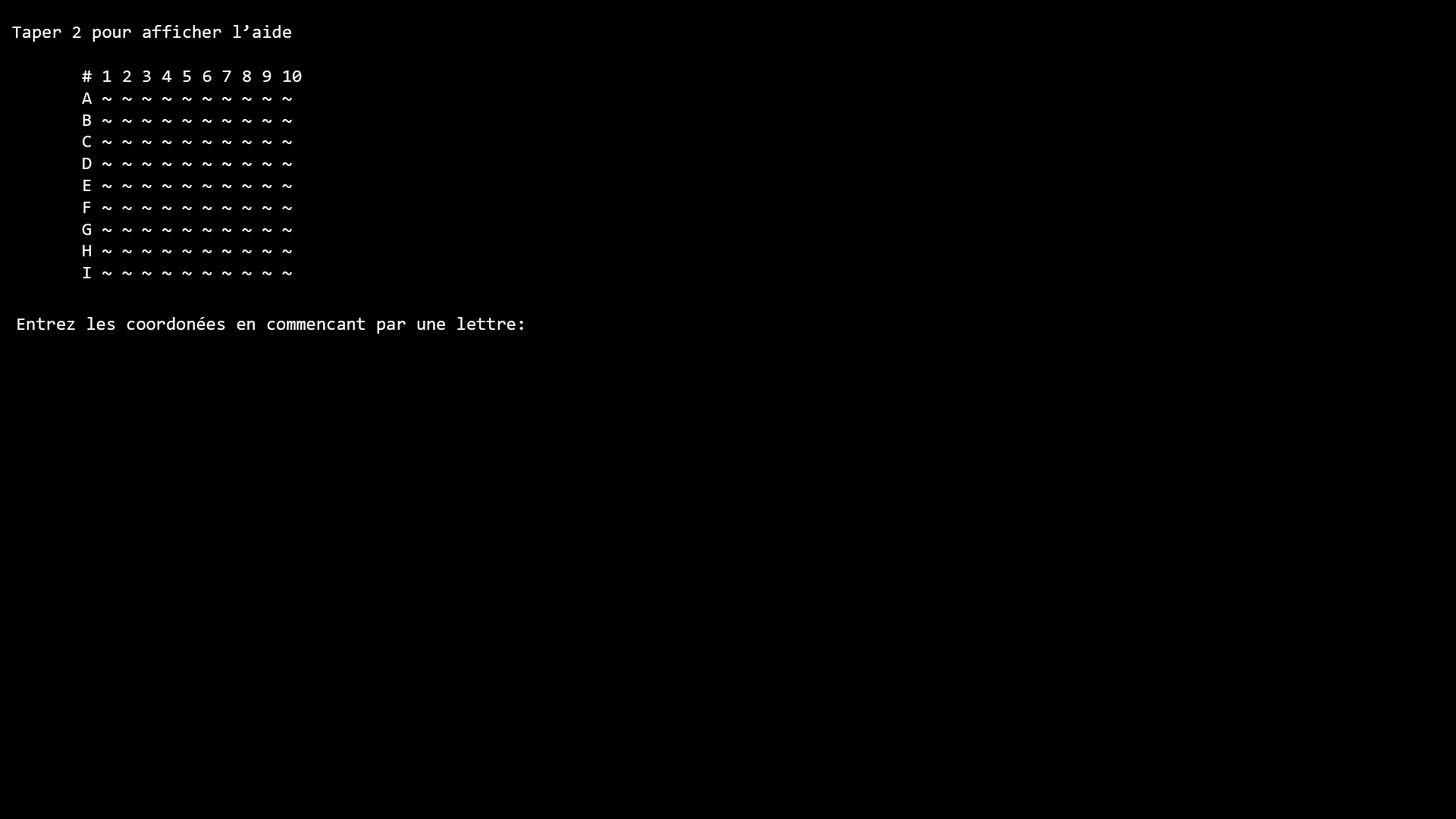
<style>
.page{position:relative;width:1456px;height:819px;background:#000000}
.page>*{position:absolute;margin:0}
.t1{font:18.2px "Consolas";color:#fcf7f7}
</style>
<div class="page">
<p class="t1" style="left:12px;top:25px;width:279px;height:17px">Taper 2 pour afficher l’aide</p>
<p class="t1" style="left:82px;top:71px;width:220px;height:207px"># 1 2 3 4 5 6 7 8 9 10<br>A ~ ~ ~ ~ ~ ~ ~ ~ ~ ~ <br>B ~ ~ ~ ~ ~ ~ ~ ~ ~ ~<br>C ~ ~ ~ ~ ~ ~ ~ ~ ~ ~<br>D ~ ~ ~ ~ ~ ~ ~ ~ ~ ~<br>E ~ ~ ~ ~ ~ ~ ~ ~ ~ ~<br>F ~ ~ ~ ~ ~ ~ ~ ~ ~ ~<br>G ~ ~ ~ ~ ~ ~ ~ ~ ~ ~<br>H ~ ~ ~ ~ ~ ~ ~ ~ ~ ~<br>I ~ ~ ~ ~ ~ ~ ~ ~ ~ ~</p>
<p class="t1" style="left:17px;top:317px;width:506px;height:17px">Entrez les coordonées en commencant par une lettre:</p>
</div>
